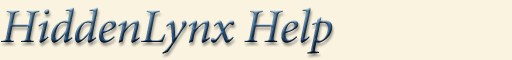
<style>
.page{position:relative;width:512px;height:60px;background:#faf3e0}
.page>*{position:absolute;margin:0}
.t1{font:48px "Minion-Italic"}
</style>
<div class="page">
<p class="t1" style="left:1px;top:7px;width:332px;height:47px">HiddenLynx Help</p>
</div>
